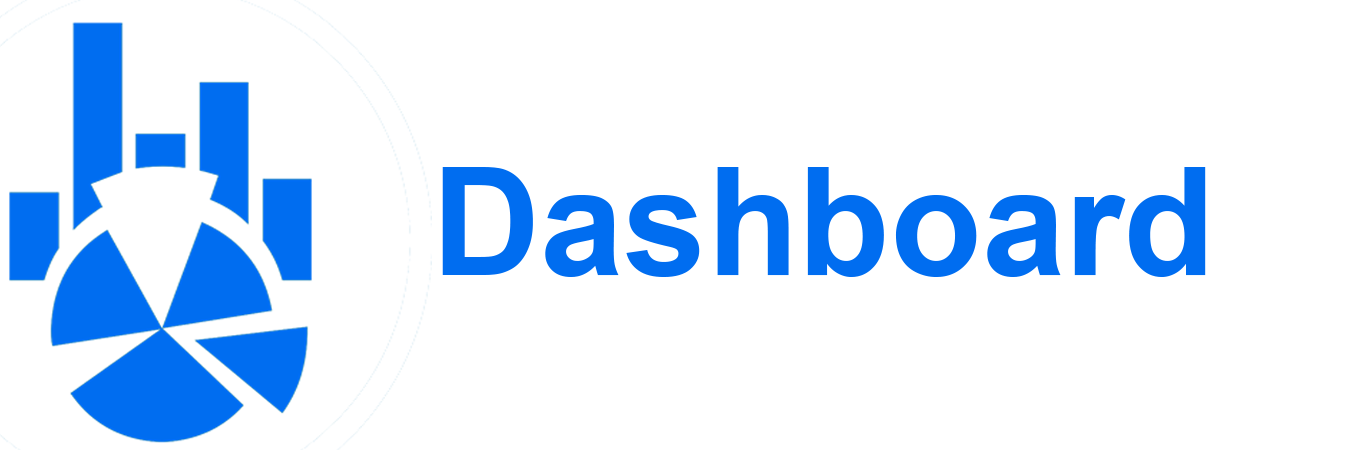
<style>
.page{position:relative;width:1350px;height:450px;background:#ffffff}
.page>*{position:absolute;margin:0}
.t1{font:150px "Arial-BoldMT";color:#006df0}
</style>
<div class="page">
<p class="t1" style="left:442px;top:167px;width:764px;height:110px">Dashboard</p>
</div>
